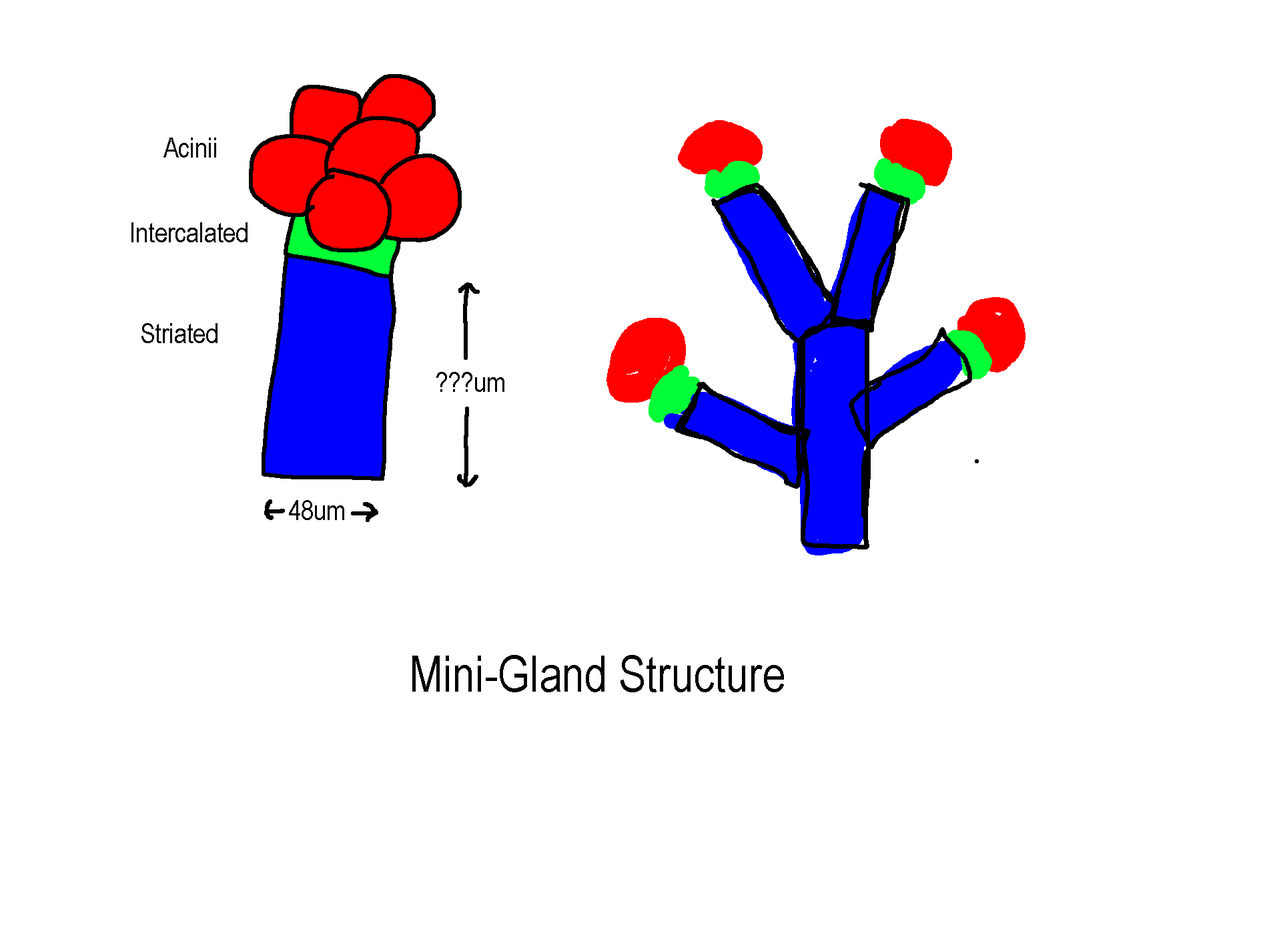
<style>
.page{position:relative;width:1261px;height:946px;background:#ffffff}
.page>*{position:absolute;margin:0}
.t1{font:27.8px "ArialNarrow";color:#000000}
.t2{font:50px "ArialNarrow";color:#000000}
</style>
<div class="page">
<p class="t1" style="left:163px;top:137px;width:53px;height:20px">Acinii</p>
<p class="t1" style="left:131px;top:222px;width:117px;height:20px">Intercalated</p>
<p class="t1" style="left:141px;top:323px;width:77px;height:20px">Striated</p>
<p class="t2" style="left:412px;top:655px;width:372px;height:37px">Mini-Gland Structure</p>
</div>
